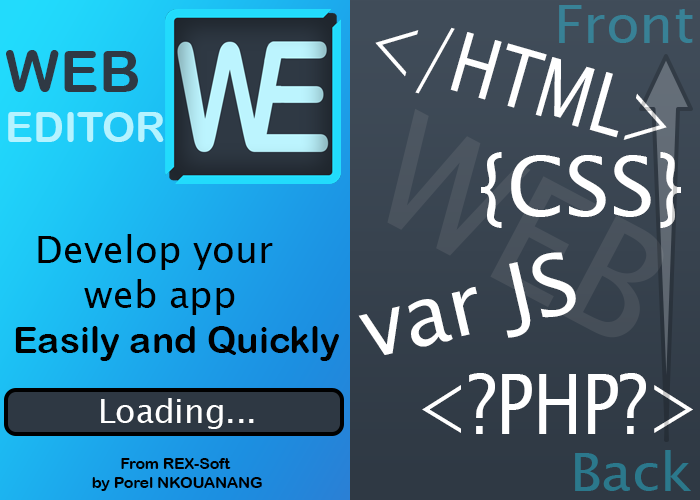
<style>
.page{position:relative;width:700px;height:500px}
.page>*{position:absolute;margin:0}
.t1{font:83.3px "LucidaSansUnicode";color:#ffffff;scale:0.78 1}
.t2{font:41.7px "ArialRoundedMTBold";color:#b5f4ff}
.t3{font:58.3px "ArialRoundedMTBold";color:#2f3944}
.t4{font:156.9px "LucidaSansUnicode";color:#ffffff}
.t5{font:83.3px "LucidaSansUnicode";color:#ffffff}
.t6{font:37.2px "LucidaSansUnicode";color:#000000}
.t7{font:37.2px "ArialRoundedMTBold";color:#000000}
.t8{font:83.3px "LucidaSansUnicode";color:#ffffff;scale:0.8 1}
.t9{font:33px "LucidaSansUnicode";color:#ffffff}
.t10{font:15.7px "ArialRoundedMTBold";color:#000000}
</style>
<div class="page">
<p class="t1" style="left:375px;top:27px;width:292px;height:113px;rotate:16deg">&lt;/HTML&gt;</p>
<p class="t2" style="left:6px;top:50px;width:158px;height:92px"><span class="t3">WEB<br></span>EDITOR</p>
<p class="t4" style="left:387px;top:108px;width:277px;height:230px;rotate:28deg;opacity:0.05">WEB</p>
<p class="t5" style="left:481px;top:152px;width:200px;height:76px">{CSS}</p>
<p class="t6" style="left:15px;top:234px;width:324px;height:127px;text-align:center">Develop your <br>web app<br> <span class="t7">Easily and Quickly</span></p>
<p class="t5" style="left:358px;top:252px;width:218px;height:103px;rotate:-13deg">var JS</p>
<p class="t8" style="left:422px;top:373px;width:271px;height:61px">&lt;?PHP?&gt;</p>
<p class="t9" style="left:101px;top:398px;width:153px;height:31px">Loading...</p>
<p class="t10" style="left:92px;top:458px;width:170px;height:33px;text-align:center">From REX-Soft <br>by Porel NKOUANANG</p>
</div>
